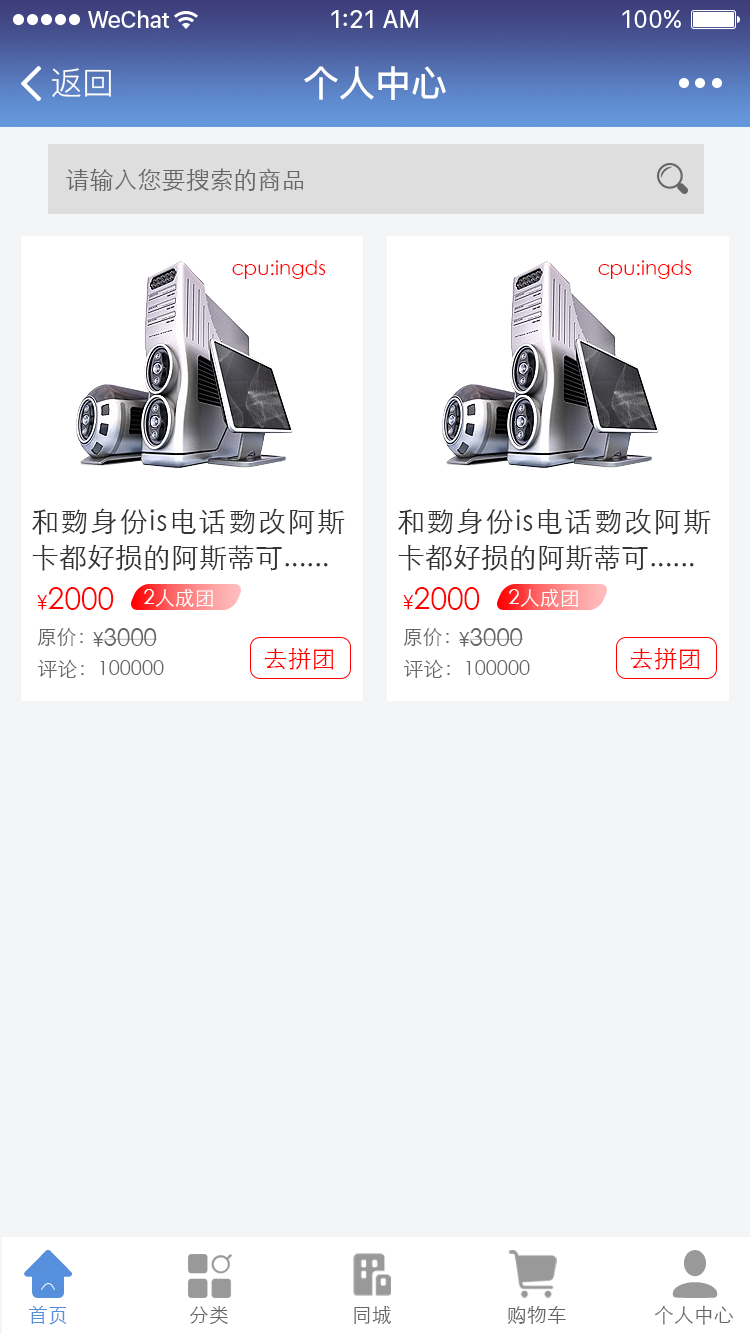
<style>
.page{position:relative;width:750px;height:1334px;background:#f4f5f6}
.page>*{position:absolute;margin:0}
.t1{font:32px "PingFang-SC-Regular";color:#ffffff}
.t2{font:36px "PingFang-SC-Bold";color:#ffffff}
.t3{font:24px "STXihei";color:#666666}
.t4{font:20px "STXihei";color:#ff0000}
.t5{font:28px/36px "STXihei";color:#333333}
.t6{font:30px "STXihei";color:#ff0000}
.t7{font:20px "STXihei";color:#ffffff}
.t8{font:20px "STXihei";color:#666666}
.t9{font:24px "STXihei";color:#ff0000}
.t10{font:20px "STXihei";color:#568fdc}
</style>
<div class="page">
<p class="t1" style="left:52px;top:68px;width:59px;height:29px">返回</p>
<p class="t2" style="left:304px;top:66px;width:142px;height:34px">个人中心</p>
<p class="t3" style="left:66px;top:168px;width:238px;height:23px">请输入您要搜索的商品</p>
<p class="t4" style="left:232px;top:260px;width:94px;height:19px">cpu:ingds</p>
<p class="t4" style="left:598px;top:260px;width:94px;height:19px">cpu:ingds</p>
<p class="t5" style="left:32px;top:508px;width:313px;height:63px;text-align:justify">和覅身份is电话覅改阿斯卡都好损的阿斯蒂可......</p>
<p class="t5" style="left:398px;top:508px;width:313px;height:63px;text-align:justify">和覅身份is电话覅改阿斯卡都好损的阿斯蒂可......</p>
<p class="t6" style="left:37px;top:587px;width:77px;height:23px"><span class="t4">¥</span>2000</p>
<p class="t7" style="left:144px;top:589px;width:69px;height:18px">2人成团</p>
<p class="t6" style="left:403px;top:587px;width:77px;height:23px"><span class="t4">¥</span>2000</p>
<p class="t7" style="left:509px;top:589px;width:69px;height:18px">2人成团</p>
<p class="t8" style="left:37px;top:628px;width:46px;height:19px">原价：</p>
<p class="t3" style="left:92px;top:628px;width:65px;height:19px"><span class="t8">¥</span>3000</p>
<p class="t8" style="left:403px;top:628px;width:46px;height:19px">原价：</p>
<p class="t3" style="left:458px;top:628px;width:65px;height:19px"><span class="t8">¥</span>3000</p>
<p class="t9" style="left:264px;top:648px;width:70px;height:22px">去拼团</p>
<p class="t9" style="left:630px;top:648px;width:70px;height:22px">去拼团</p>
<p class="t8" style="left:38px;top:659px;width:126px;height:19px">评论：100000</p>
<p class="t8" style="left:404px;top:659px;width:126px;height:19px">评论：100000</p>
<p class="t10" style="left:28px;top:1305px;width:39px;height:20px">首页</p>
<p class="t8" style="left:190px;top:1306px;width:38px;height:19px">分类</p>
<p class="t8" style="left:354px;top:1306px;width:37px;height:18px">同城</p>
<p class="t8" style="left:507px;top:1305px;width:59px;height:19px">购物车</p>
<p class="t8" style="left:654px;top:1305px;width:79px;height:20px">个人中心</p>
</div>
